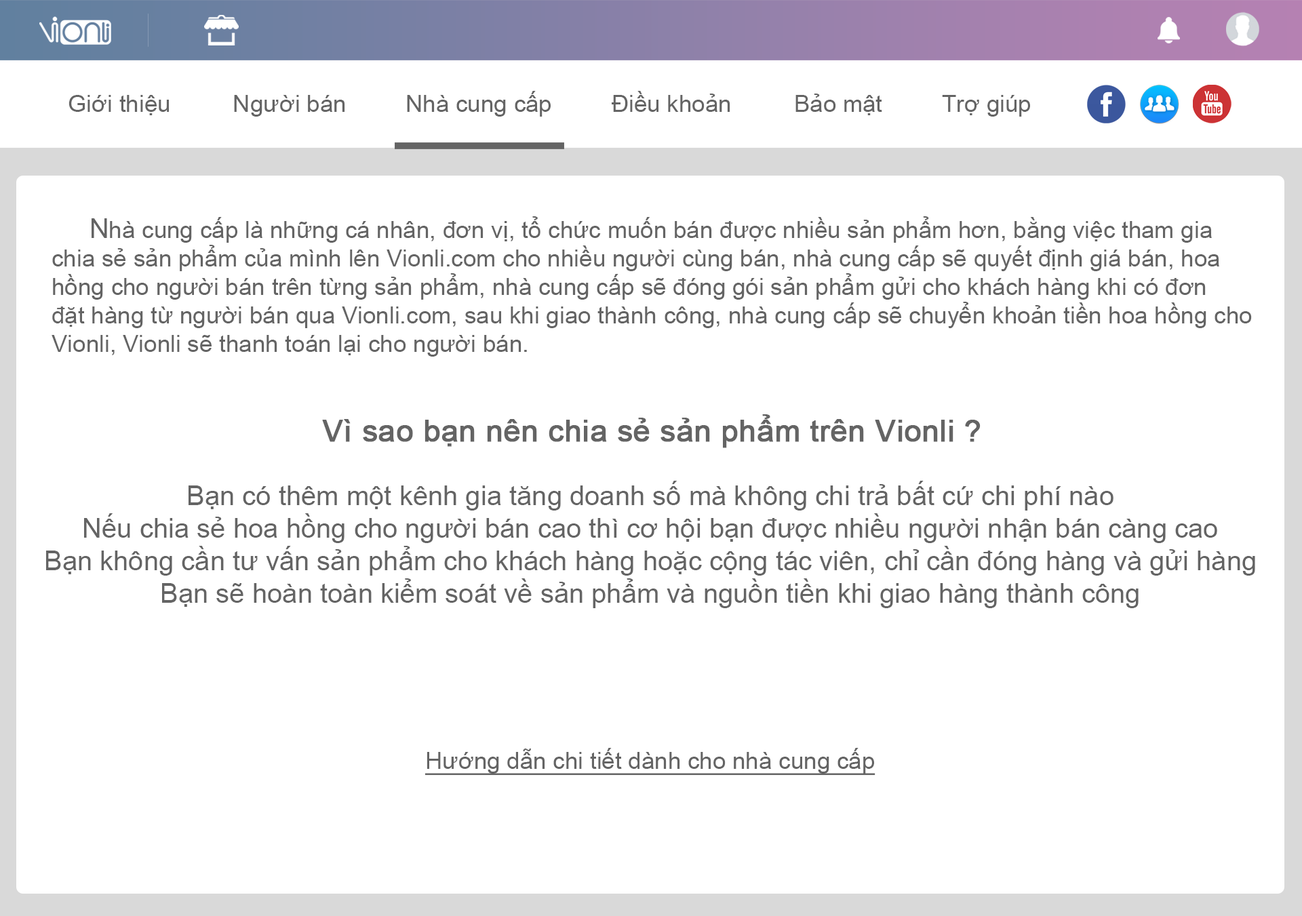
<style>
.page{position:relative;width:1302px;height:916px;background:#ffffff}
.page>*{position:absolute;margin:0}
.t1{font:23.7px "ArialMT";color:#646464}
.t2{font:27.1px "ArialMT";color:#646464}
.t3{font:30.5px "ArialMT";color:#646464;font-weight:bold}
.t4{font:23.7px "ArialMT";color:#646464;text-decoration:underline}
</style>
<div class="page">
<p class="t1" style="left:68px;top:95px;width:101px;height:20px">Giới thiệu</p>
<p class="t1" style="left:234px;top:95px;width:111px;height:22px">Người bán</p>
<p class="t1" style="left:407px;top:91px;width:144px;height:26px">Nhà cung cấp</p>
<p class="t1" style="left:612px;top:91px;width:118px;height:21px">Điều khoản</p>
<p class="t1" style="left:795px;top:94px;width:87px;height:21px">Bảo mật</p>
<p class="t1" style="left:942px;top:95px;width:88px;height:22px">Trợ giúp</p>
<p class="t1" style="left:52px;top:216px;width:1200px;height:141px"><span class="t2">     N</span>hà cung cấp là những cá nhân, đơn vị, tổ chức muốn bán được nhiều sản phẩm hơn, bằng việc tham gia<br>chia sẻ sản phẩm của mình lên Vionli.com cho nhiều người cùng bán, nhà cung cấp sẽ quyết định giá bán, hoa<br>hồng cho người bán trên từng sản phẩm, nhà cung cấp sẽ đóng gói sản phẩm gửi cho khách hàng khi có đơn<br>đặt hàng từ người bán qua Vionli.com, sau khi giao thành công, nhà cung cấp sẽ chuyển khoản tiền hoa hồng cho<br>Vionli, Vionli sẽ thanh toán lại cho người bán.</p>
<p class="t3" style="left:322px;top:414px;width:658px;height:34px">Vì sao bạn nên chia sẻ sản phẩm trên Vionli ?</p>
<p class="t2" style="left:46px;top:481px;width:1209px;height:127px;text-align:center">Bạn có thêm một kênh gia tăng doanh số mà không chi trả bất cứ chi phí nào<br>Nếu chia sẻ hoa hồng cho người bán cao thì cơ hội bạn được nhiều người nhận bán càng cao<br>Bạn không cần tư vấn sản phẩm cho khách hàng hoặc cộng tác viên, chỉ cần đóng hàng và gửi hàng<br>Bạn sẽ hoàn toàn kiểm soát về sản phẩm và nguồn tiền khi giao hàng thành công</p>
<p class="t4" style="left:424px;top:748px;width:451px;height:28px">Hướng dẫn chi tiết dành cho nhà cung cấp</p>
</div>
